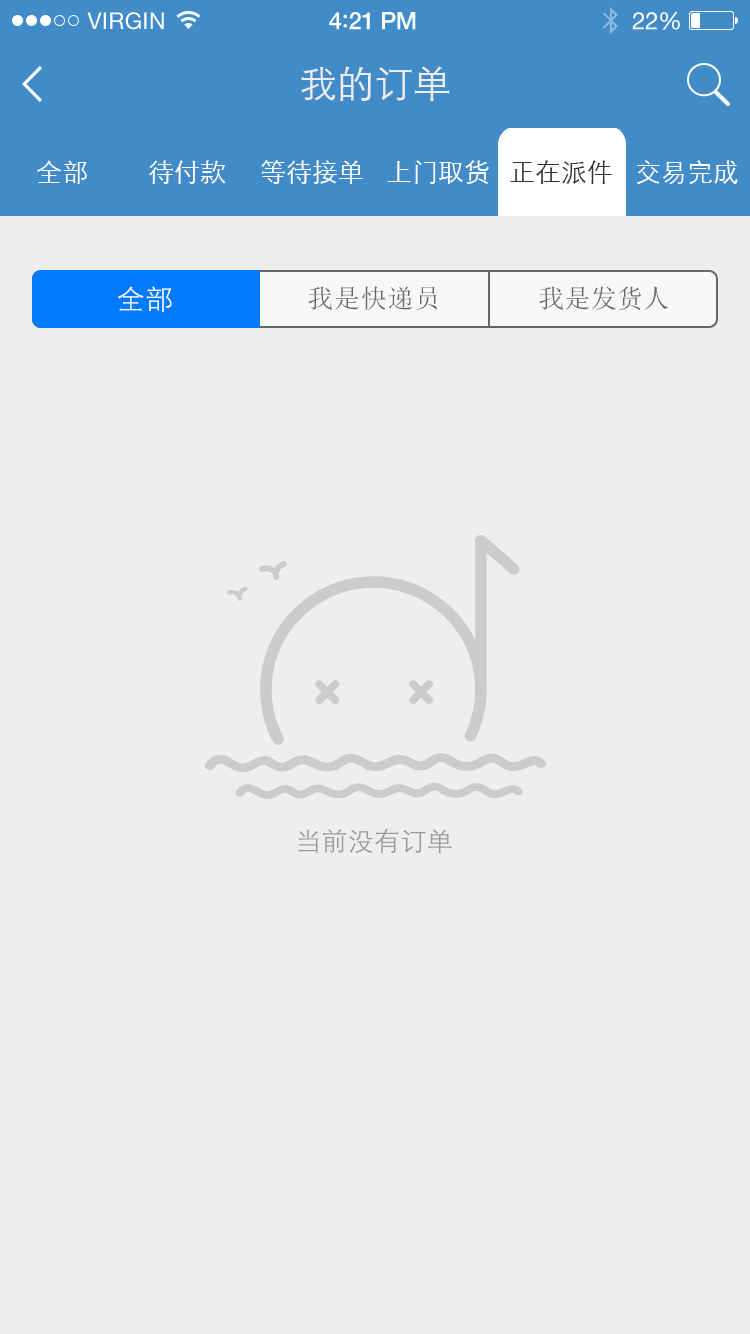
<style>
.page{position:relative;width:750px;height:1334px;background:#eeeeee}
.page>*{position:absolute;margin:0}
.t1{font:23px "HelveticaNeue";letter-spacing:0.02em;color:#ffffff}
.t2{font:24px "HelveticaNeue-Medium";letter-spacing:-0.02em;color:#ffffff}
.t3{font:26px "Avenir-Medium";letter-spacing:-0.02em;color:#ffffff}
.t4{font:24px "HelveticaNeue";letter-spacing:-0.02em;color:#ffffff}
.t5{font:38px "STXihei";color:#eeeeee}
.t6{font:26px "STXihei";color:#ffffff}
.t7{font:26px "STXihei";color:#333333}
.t8{font:28px "STXihei";letter-spacing:0.02em;color:#ffffff}
.t9{font:26px "SimSun";letter-spacing:0.03em;color:#666666}
.t10{font:26px "SimSun";letter-spacing:0.01em;color:#666666}
.t11{font:26px "STXihei";letter-spacing:0.01em;color:#999999}
</style>
<div class="page">
<p class="t1" style="left:87px;top:12px;width:77px;height:18px">VIRGIN</p>
<p class="t2" style="left:329px;top:12px;width:87px;height:18px">4<span class="t3">:</span>21 PM</p>
<p class="t4" style="left:632px;top:12px;width:48px;height:18px">22%</p>
<p class="t5" style="left:301px;top:66px;width:149px;height:35px">我的订单</p>
<p class="t6" style="left:37px;top:160px;width:50px;height:24px">全部</p>
<p class="t6" style="left:149px;top:160px;width:77px;height:24px">待付款</p>
<p class="t6" style="left:261px;top:160px;width:102px;height:24px">等待接单</p>
<p class="t6" style="left:387px;top:160px;width:102px;height:24px">上门取货</p>
<p class="t7" style="left:510px;top:160px;width:102px;height:24px">正在派件</p>
<p class="t6" style="left:636px;top:160px;width:102px;height:24px">交易完成</p>
<p class="t8" style="left:117px;top:286px;width:55px;height:26px">全部</p>
<p class="t9" style="left:308px;top:286px;width:129px;height:24px">我是快递员</p>
<p class="t10" style="left:539px;top:286px;width:130px;height:25px">我是发货人</p>
<p class="t11" style="left:298px;top:829px;width:154px;height:25px">当前没有订单</p>
</div>
